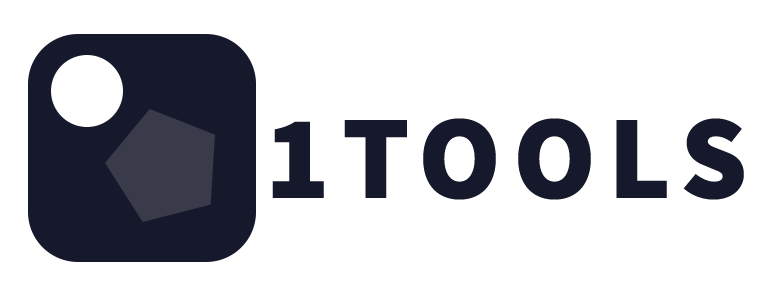
<style>
.page{position:relative;width:760px;height:300px;background:#ffffff}
.page>*{position:absolute;margin:0}
.t1{font:120px "SourceSansPro-Black";letter-spacing:0.1em;color:#16192c;text-transform:uppercase}
</style>
<div class="page">
<p class="t1" style="left:272px;top:118px;width:472px;height:82px">1Tools</p>
</div>
